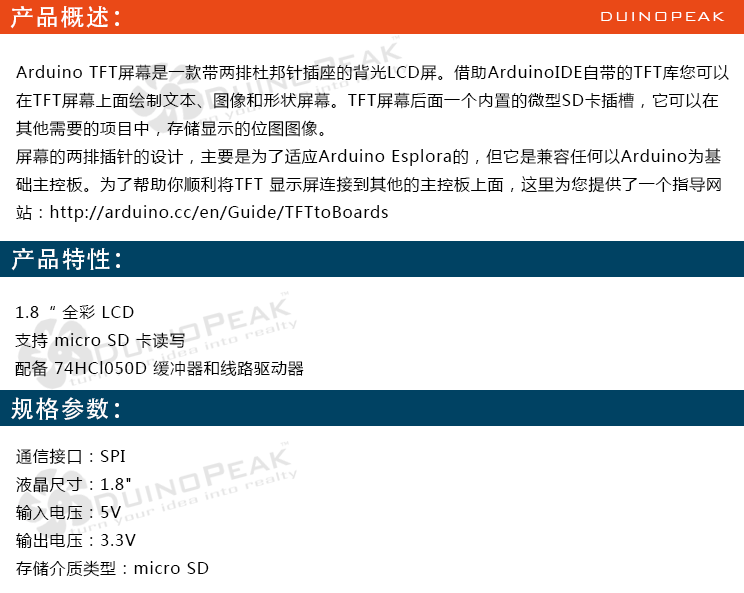
<style>
.page{position:relative;width:744px;height:593px;background:#ffffff}
.page>*{position:absolute;margin:0}
.t1{font:24px "AdobeHeitiStd-Regular";letter-spacing:0.05em;color:#ffffff}
.t2{font:18px "BankGothicBT-Light";letter-spacing:0.05em;color:#ffffff}
.t3{font:16px "MicrosoftYaHei";letter-spacing:0.05em;color:#000000}
</style>
<div class="page">
<p class="t1" style="left:10px;top:6px;width:109px;height:23px">产品概述：</p>
<p class="t2" style="left:601px;top:12px;width:124px;height:9px">DUINOPEAK</p>
<p class="t3" style="left:15px;top:64px;width:714px;height:158px">Arduino TFT屏幕是一款带两排杜邦针插座的背光LCD屏。借助ArduinoIDE自带的TFT库您可以<br>在TFT屏幕上面绘制文本、图像和形状屏幕。TFT屏幕后面一个内置的微型SD卡插槽，它可以在<br>其他需要的项目中，存储显示的位图图像。<br>屏幕的两排插针的设计，主要是为了适应Arduino Esplora的，但它是兼容任何以Arduino为基<br>础主控板。为了帮助你顺利将TFT 显示屏连接到其他的主控板上面，这里为您提供了一个指导网<br>站：http://arduino.cc/en/Guide/TFTtoBoards</p>
<p class="t1" style="left:11px;top:247px;width:109px;height:24px">产品特性：</p>
<p class="t3" style="left:15px;top:305px;width:289px;height:72px">1.8“ 全彩 LCD<br>支持 micro SD 卡读写<br>配备 74HCl050D 缓冲器和线路驱动器</p>
<p class="t1" style="left:11px;top:397px;width:108px;height:23px">规格参数：</p>
<p class="t3" style="left:16px;top:448px;width:193px;height:129px">通信接口：SPI<br>液晶尺寸：1.8"<br>输入电压：5V<br>输出电压：3.3V<br>存储介质类型：micro SD</p>
</div>
